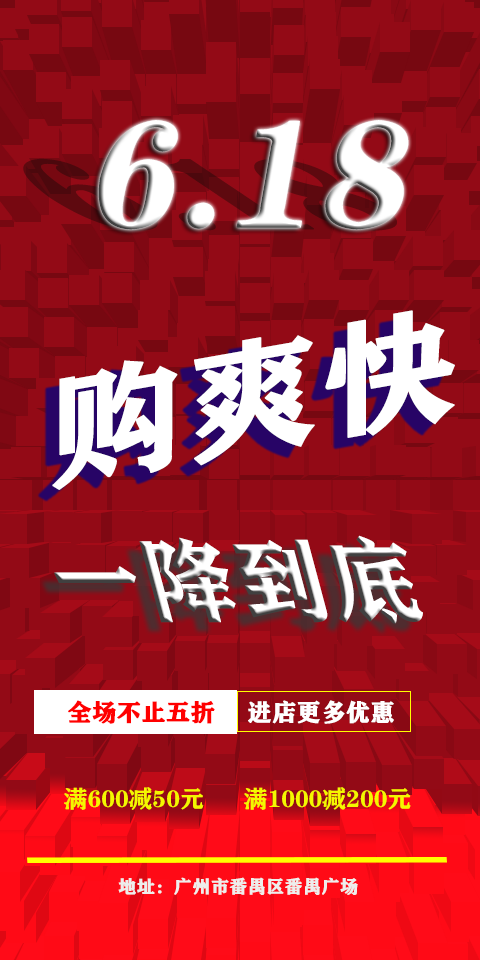
<style>
.page{position:relative;width:480px;height:960px;background:#930a16}
.page>*{position:absolute;margin:0}
.t1{font:152px "FZCHSJW--GB1-0";color:#ffffff;font-weight:bold;font-style:italic}
.t2{font:125.4px "FZCHSJW--GB1-0";color:#ffffff;font-weight:bold;scale:1.08 1}
.t3{font:93.2px "FZCHSJW--GB1-0";font-weight:bold;scale:0.97 1}
.t4{font:24px "FZCHSJW--GB1-0";color:#ff0000;font-weight:bold}
.t5{font:24px "FZCHSJW--GB1-0";color:#ffffff;font-weight:bold}
.t6{font:24px "FZCHSJW--GB1-0";color:#f4f700}
.t7{font:18px "FZCHSJW--GB1-0";color:#eeeeec;font-weight:bold}
</style>
<div class="page">
<p class="t1" style="left:98px;top:120px;width:311px;height:110px">6.18</p>
<p class="t2" style="left:52px;top:310px;width:403px;height:180px;rotate:-10deg">购爽快</p>
<p class="t3" style="left:54px;top:535px;width:369px;height:89px">一降到底</p>
<p class="t4" style="left:68px;top:700px;width:147px;height:24px">全场不止五折</p>
<p class="t5" style="left:248px;top:700px;width:146px;height:24px">进店更多优惠</p>
<p class="t6" style="left:64px;top:787px;width:347px;height:23px">满600减50元  满1000减200元</p>
<p class="t7" style="left:118px;top:877px;width:240px;height:18px">地址：广州市番禺区番禺广场</p>
</div>
